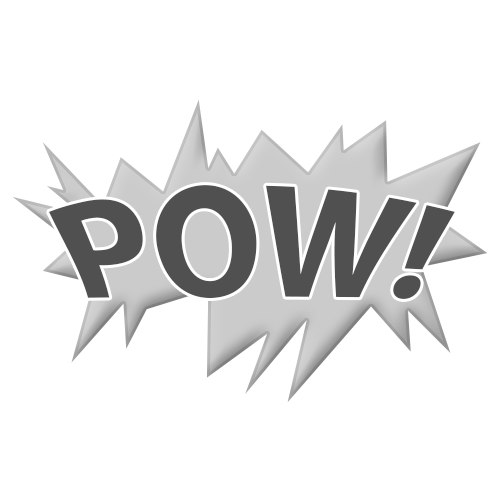
<style>
.page{position:relative;width:500px;height:500px;background:#ffffff}
.page>*{position:absolute;margin:0}
.t1{font:136.9px "MyriadPro-Bold";color:#505050}
</style>
<div class="page">
<p class="t1" style="left:49px;top:185px;width:406px;height:114px">POW!</p>
</div>
